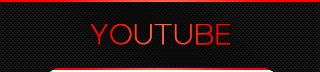
<style>
.page{position:relative;width:320px;height:72px}
.page>*{position:absolute;margin:0}
.t1{font:26.4px "SlimJoe";font-weight:bold}
</style>
<div class="page">
<p class="t1" style="left:91px;top:24px;width:140px;height:21px">YouTube</p>
</div>
